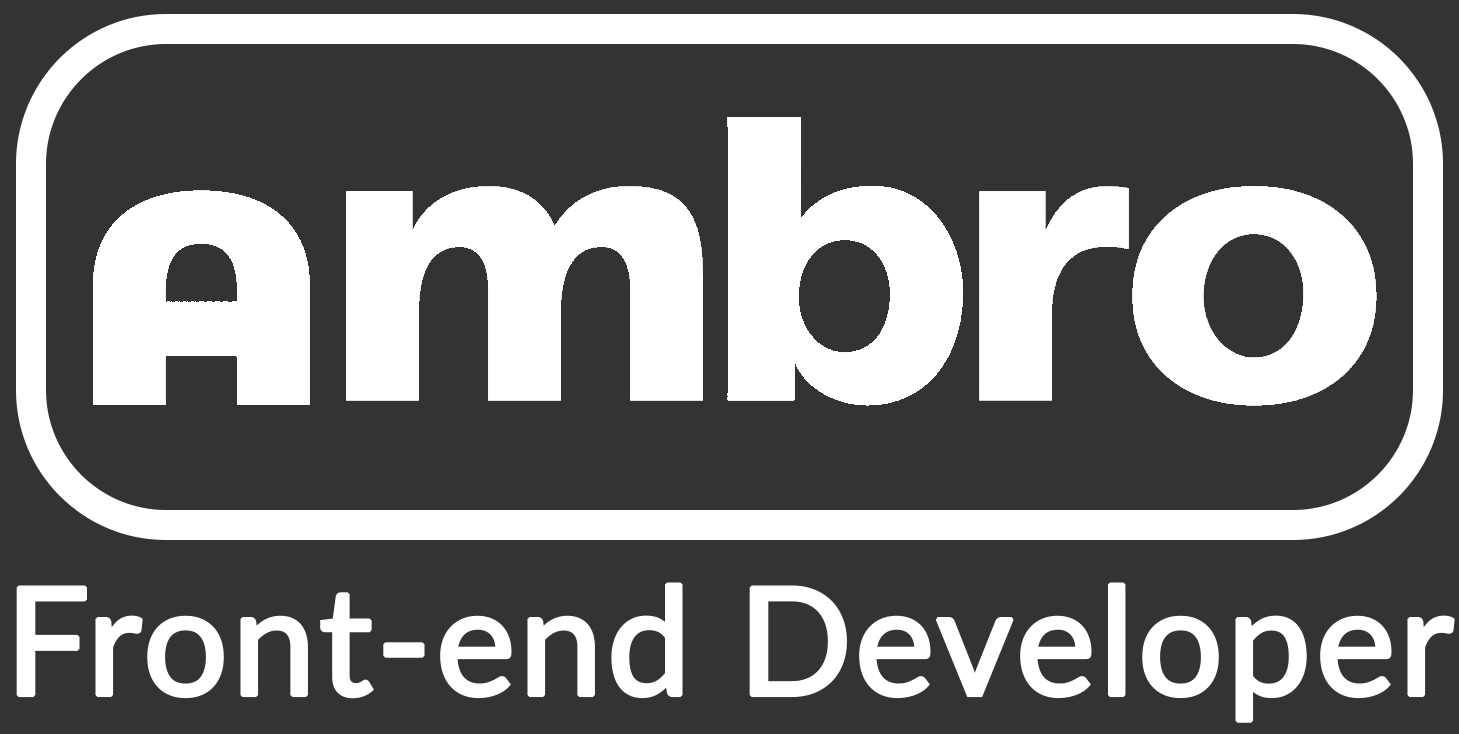
<style>
.page{position:relative;width:1459px;height:734px;background:#333333}
.page>*{position:absolute;margin:0}
.t1{font:150px "Lato-Regular";color:#ffffff;font-weight:bold}
</style>
<div class="page">
<p class="t1" style="left:16px;top:582px;width:1439px;height:141px">Front-end Developer</p>
</div>
